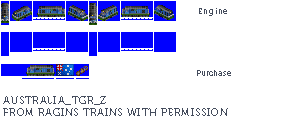
<style>
.page{position:relative;width:289px;height:124px;background:#ffffff}
.page>*{position:absolute;margin:0}
.t1{font:8px "Museo700-Regular";letter-spacing:0.075em;color:#444c5c}
.t2{font:8px "Museo700-Regular";color:#444c5c}
.t3{font:10px "Museo700-Regular";letter-spacing:0.075em;color:#444c5c;text-transform:uppercase}
</style>
<div class="page">
<p class="t1" style="left:199px;top:8px;width:28px;height:8px">Engine</p>
<p class="t2" style="left:197px;top:70px;width:34px;height:6px">Purchase</p>
<p class="t3" style="left:3px;top:96px;width:225px;height:20px">Australia_TGR_Z<br>from ragins trains with permission</p>
</div>
